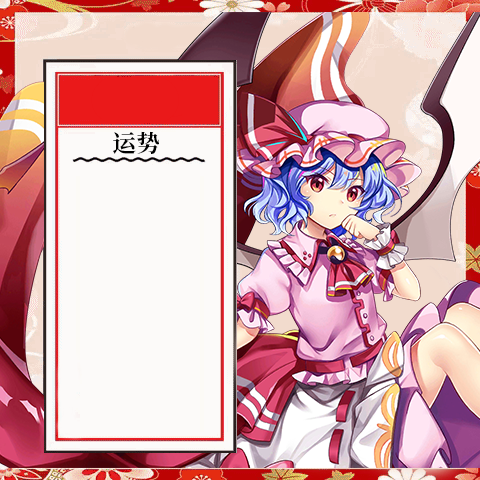
<style>
.page{position:relative;width:480px;height:480px;background:#fcfaf9}
.page>*{position:absolute;margin:0}
.t1{font:24px "NotoSerifSC-Bold";color:#000000}
</style>
<div class="page">
<p class="t1" style="left:113px;top:131px;width:46px;height:23px">运势</p>
</div>
